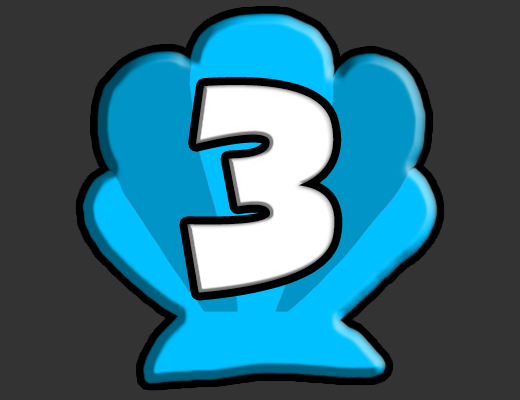
<style>
.page{position:relative;width:520px;height:400px;background:#333333}
.page>*{position:absolute;margin:0}
.t1{font:279.4px "Funhouse";color:#ffffff}
</style>
<div class="page">
<p class="t1" style="left:187px;top:85px;width:148px;height:208px">3</p>
</div>
